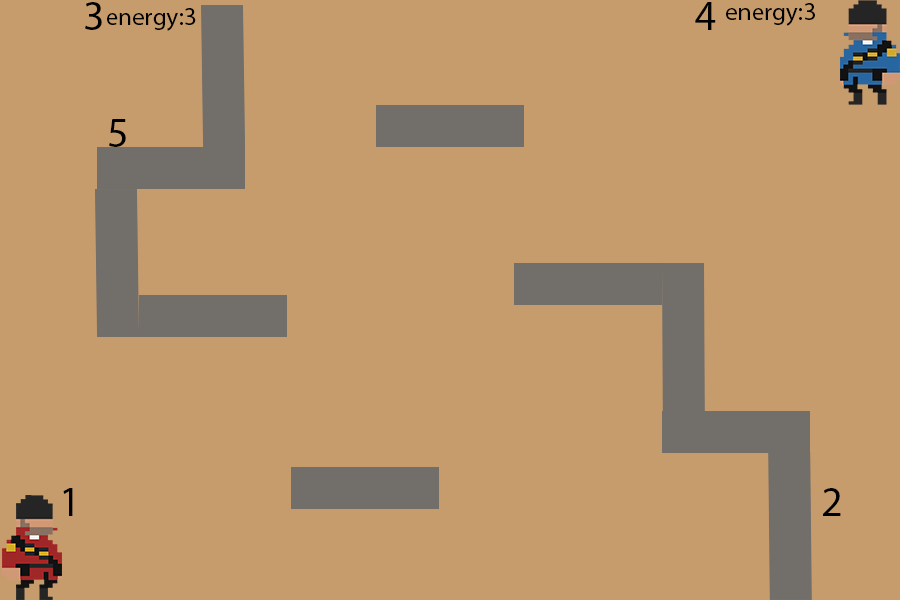
<style>
.page{position:relative;width:900px;height:600px;background:#c69c6d}
.page>*{position:absolute;margin:0}
.t1{font:41.7px "MyriadPro-Regular";color:#000000}
.t2{font:25px "MyriadPro-Regular";color:#000000}
</style>
<div class="page">
<p class="t1" style="left:85px;top:2px;width:17px;height:28px">3</p>
<p class="t1" style="left:695px;top:2px;width:21px;height:28px">4</p>
<p class="t2" style="left:726px;top:3px;width:89px;height:23px">energy:3</p>
<p class="t2" style="left:107px;top:8px;width:89px;height:23px">energy:3</p>
<p class="t1" style="left:109px;top:119px;width:17px;height:28px">5</p>
<p class="t1" style="left:63px;top:488px;width:10px;height:28px">1</p>
<p class="t1" style="left:823px;top:488px;width:18px;height:28px">2</p>
</div>
